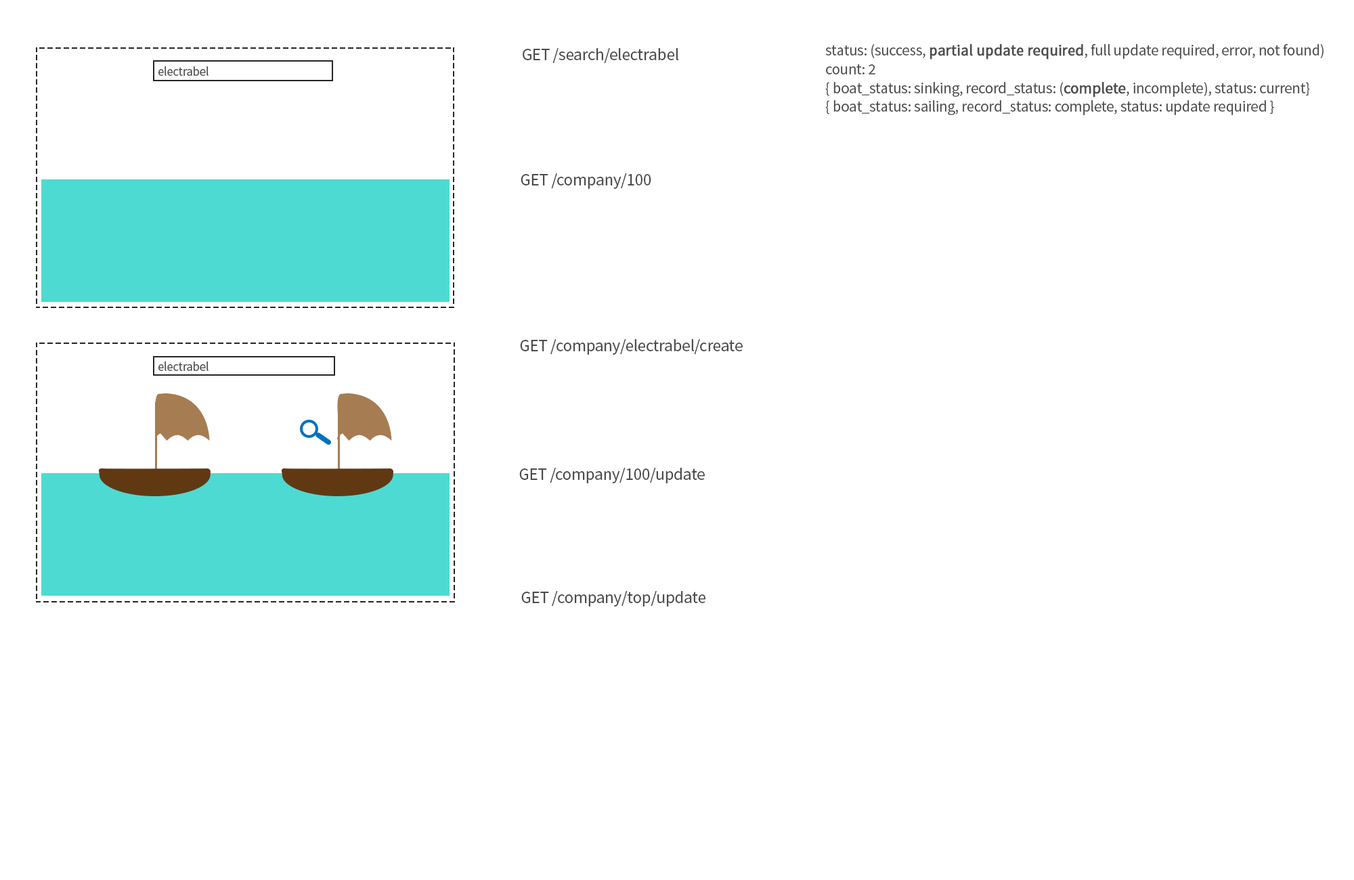
<style>
.page{position:relative;width:1354px;height:880px;background:#ffffff}
.page>*{position:absolute;margin:0}
.t1{font:17.1px "SourceSansPro-Regular";letter-spacing:-0.015em;color:#4a4b4b}
.t2{font:15.6px "SourceSansPro-Regular";letter-spacing:-0.015em;color:#4a4b4b}
.t3{font:15.6px "SourceSansPro-Regular";letter-spacing:-0.015em;color:#4a4b4b;font-weight:bold}
.t4{font:12.9px "SourceSansPro-Regular";letter-spacing:-0.015em;color:#4a4b4b}
</style>
<div class="page">
<p class="t1" style="left:523px;top:48px;width:156px;height:16px">GET /search/electrabel</p>
<p class="t2" style="left:826px;top:44px;width:498px;height:71px">status: (success, <span class="t3">partial update required</span>, full update required, error, not found)<br>count: 2<br>{ boat_status: sinking, record_status: (<span class="t3">complete</span>, incomplete), status: current}<br>{ boat_status: sailing, record_status: complete, status: update required }</p>
<p class="t4" style="left:158px;top:66px;width:51px;height:10px">electrabel</p>
<p class="t1" style="left:521px;top:173px;width:130px;height:16px">GET /company/100</p>
<p class="t1" style="left:520px;top:339px;width:223px;height:16px">GET /company/electrabel/create</p>
<p class="t4" style="left:158px;top:362px;width:51px;height:9px">electrabel</p>
<p class="t1" style="left:519px;top:468px;width:186px;height:16px">GET /company/100/update</p>
<p class="t1" style="left:521px;top:591px;width:185px;height:16px">GET /company/top/update</p>
</div>
